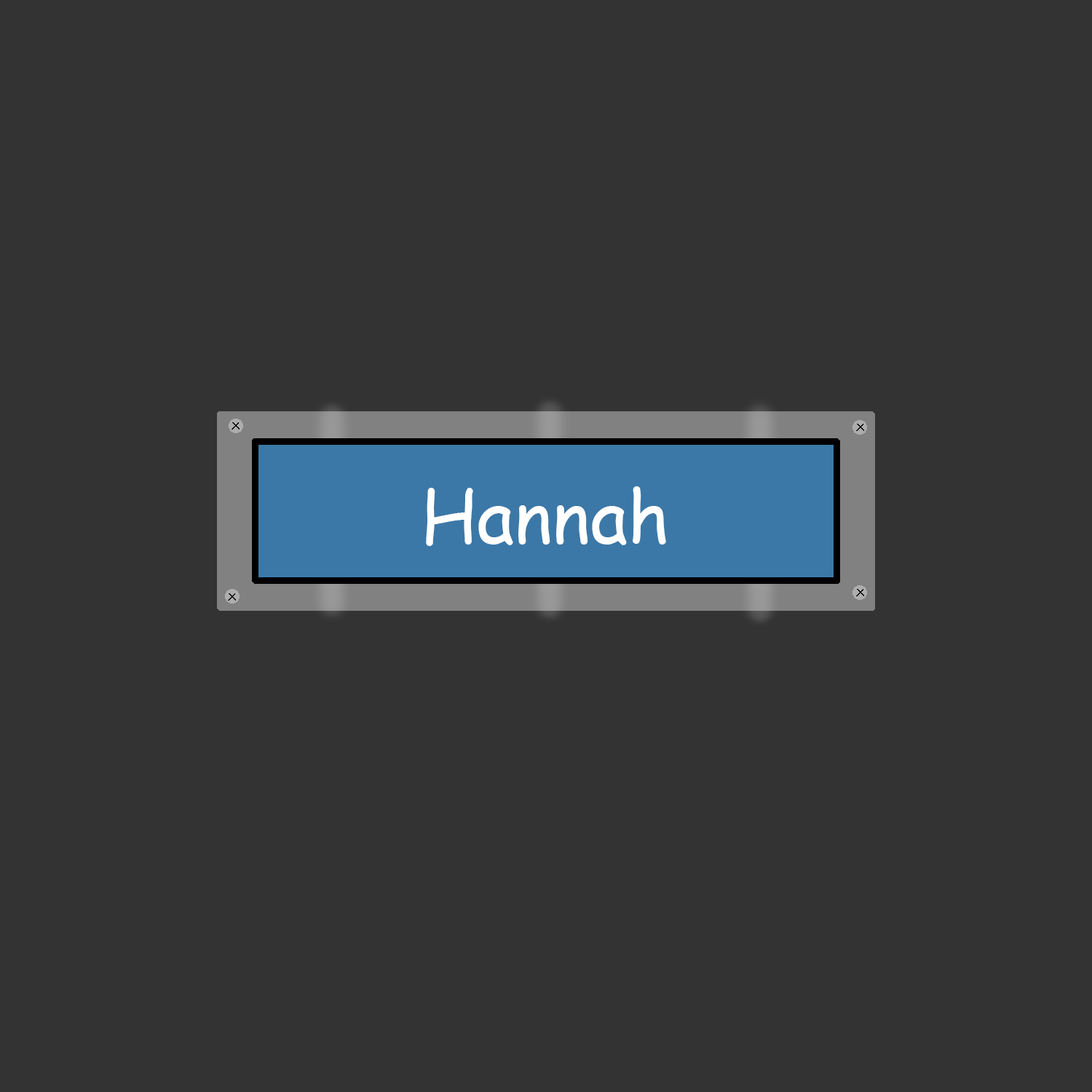
<style>
.page{position:relative;width:1092px;height:1092px;background:#333333}
.page>*{position:absolute;margin:0}
.t1{font:72.8px "ComicSansMS";color:#ffffff}
</style>
<div class="page">
<p class="t1" style="left:426px;top:486px;width:240px;height:60px">Hannah</p>
</div>
